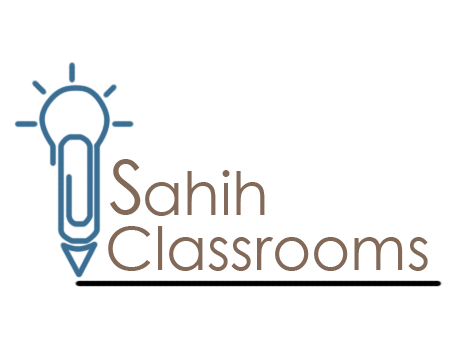
<style>
.page{position:relative;width:454px;height:340px;background:#ffffff}
.page>*{position:absolute;margin:0}
.t1{font:75.5px "CenturyGothic";color:#836958;scale:0.96 1}
.t2{font:60px "CenturyGothic";color:#836958}
</style>
<div class="page">
<p class="t1" style="left:110px;top:159px;width:31px;height:56px">S</p>
<p class="t2" style="left:145px;top:170px;width:120px;height:46px">ahih</p>
<p class="t2" style="left:108px;top:226px;width:320px;height:45px">Classrooms</p>
</div>
